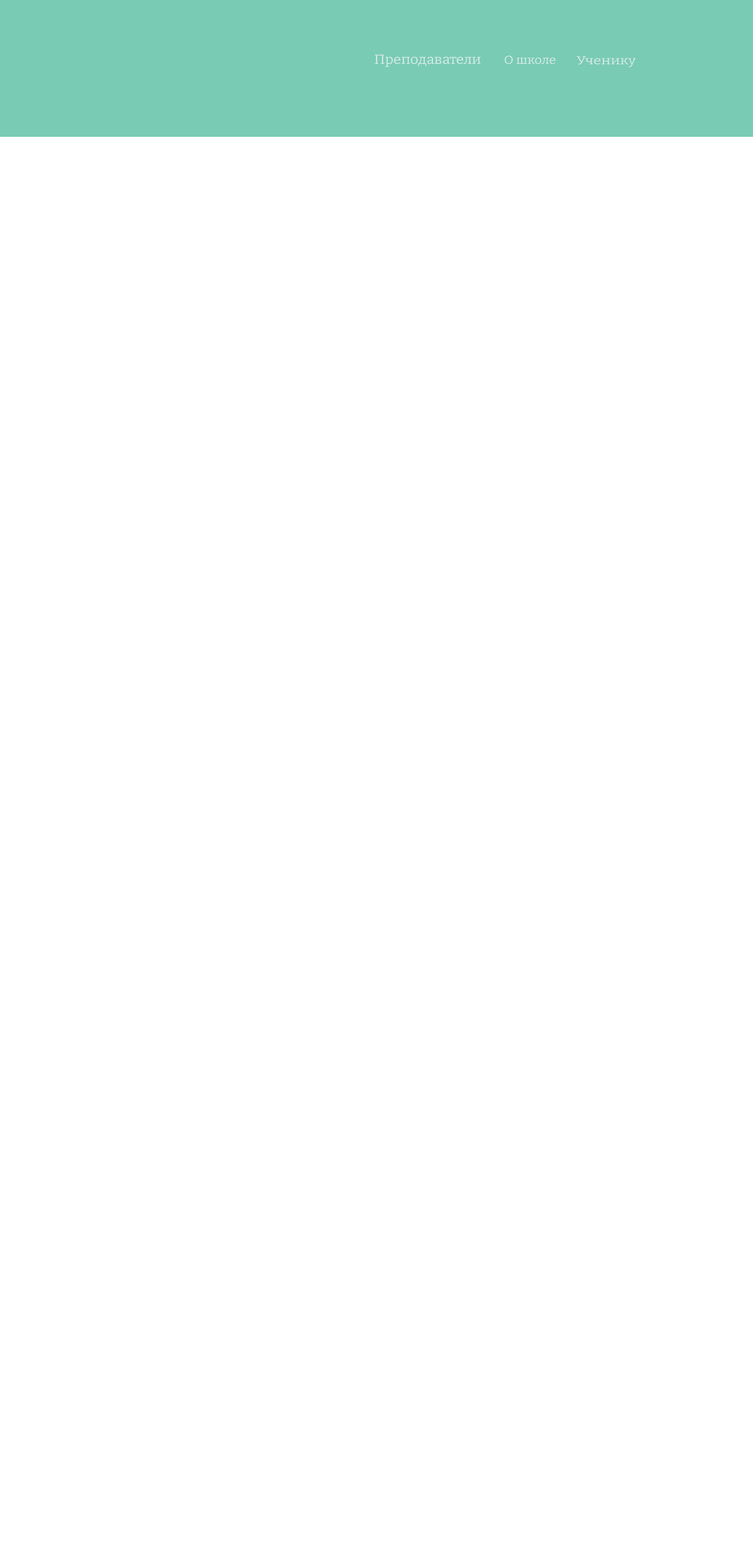
<style>
.page{position:relative;width:753px;height:1568px;background:#ffffff}
.page>*{position:absolute;margin:0}
.t1{font:13.3px "Bitter-Regular";color:#d4ebe5;scale:1.06 1}
.t2{font:11.7px "Bitter-Regular";color:#d4ebe5;scale:1.09 1}
.t3{font:11.6px "Bitter-Regular";color:#d4ebe5;scale:1.22 1}
</style>
<div class="page">
<p class="t1" style="left:374px;top:54px;width:107px;height:13px">Преподаватели</p>
<p class="t2" style="left:505px;top:56px;width:50px;height:8px">О школе</p>
<p class="t3" style="left:576px;top:56px;width:60px;height:11px">Ученику</p>
</div>
